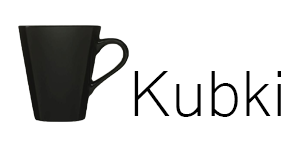
<style>
.page{position:relative;width:300px;height:146px;background:#ffffff}
.page>*{position:absolute;margin:0}
.t1{font:83.5px "Microsoft-Yi-Baiti";color:#000000}
</style>
<div class="page">
<p class="t1" style="left:134px;top:71px;width:147px;height:46px">Kubki</p>
</div>
